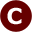
<style>
.page{position:relative;width:32px;height:32px;background:#660000}
.page>*{position:absolute;margin:0}
.t1{font:22px "Verdana-Bold";color:#ffffff}
</style>
<div class="page">
<p class="t1" style="left:7px;top:7px;width:15px;height:18px">C</p>
</div>
